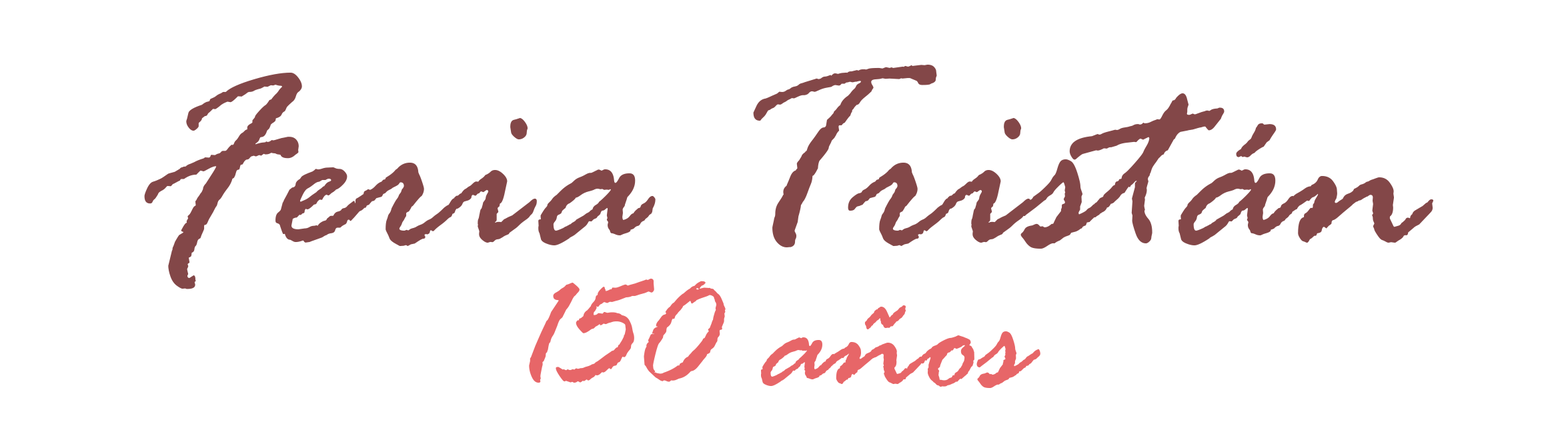
<style>
.page{position:relative;width:1568px;height:440px;background:#ffffff}
.page>*{position:absolute;margin:0}
.t1{font:269.6px "RageItalic";color:#834748}
.t2{font:171px "RageItalic";color:#e76668}
</style>
<div class="page">
<p class="t1" style="left:144px;top:65px;width:1290px;height:224px">Feria Tristán</p>
<p class="t2" style="left:529px;top:279px;width:511px;height:109px">150 años</p>
</div>
